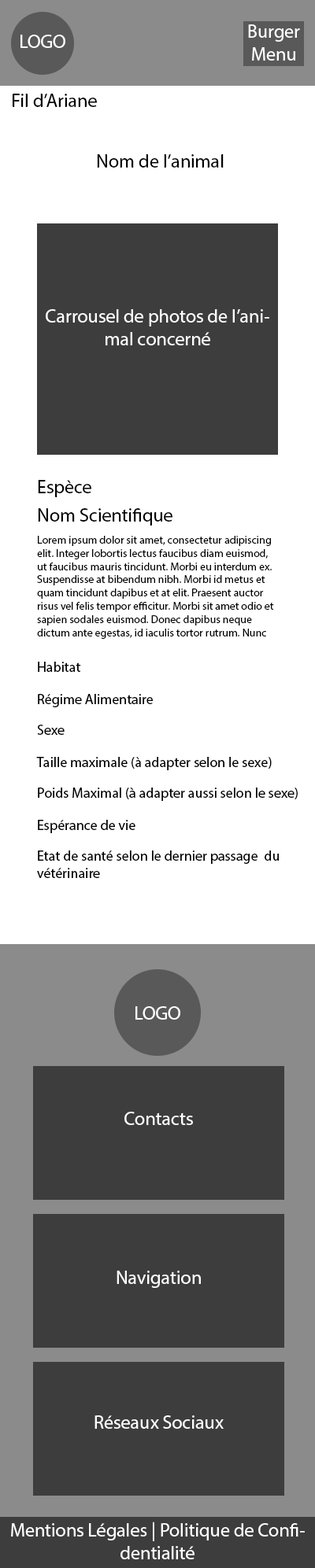
<style>
.page{position:relative;width:315px;height:1568px;background:#ffffff}
.page>*{position:absolute;margin:0}
.t1{font:18.9px "MyriadPro-Regular";color:#fffefe}
.t2{font:18.9px "MyriadPro-Regular";color:#000000}
.t3{font:18.9px "MyriadPro-Regular";color:#ffffff}
.t4{font:11px "MyriadPro-Regular";color:#000000}
.t5{font:14.2px "MyriadPro-Regular";color:#000000}
</style>
<div class="page">
<p class="t1" style="left:248px;top:24px;width:52px;height:37px;text-align:center">Burger Menu</p>
<p class="t1" style="left:20px;top:35px;width:45px;height:13px">LOGO</p>
<p class="t2" style="left:13px;top:94px;width:84px;height:13px">Fil d’Ariane</p>
<p class="t2" style="left:97px;top:154px;width:126px;height:14px">Nom de l’animal</p>
<p class="t3" style="left:46px;top:309px;width:223px;height:36px;text-align:center">Carrousel de photos de l’animal concerné</p>
<p class="t2" style="left:38px;top:480px;width:53px;height:17px">Espèce</p>
<p class="t2" style="left:38px;top:508px;width:134px;height:18px">Nom Scientifique</p>
<p class="t4" style="left:37px;top:536px;width:237px;height:103px">Lorem ipsum dolor sit amet, consectetur adipiscing elit. Integer lobortis lectus faucibus diam euismod, ut faucibus mauris tincidunt. Morbi eu interdum ex. Suspendisse at bibendum nibh. Morbi id metus et quam tincidunt dapibus et at elit. Praesent auctor risus vel felis tempor efficitur. Morbi sit amet odio et sapien sodales euismod. Donec dapibus neque dictum ante egestas, id iaculis tortor rutrum. Nunc cursus est eu scelerisque faucibus. Fusce sit amet mollis velit.</p>
<p class="t5" style="left:38px;top:662px;width:43px;height:10px">Habitat</p>
<p class="t5" style="left:38px;top:694px;width:115px;height:13px">Régime Alimentaire</p>
<p class="t5" style="left:37px;top:725px;width:28px;height:10px">Sexe</p>
<p class="t5" style="left:36px;top:757px;width:235px;height:13px">Taille maximale (à adapter selon le sexe)</p>
<p class="t5" style="left:38px;top:788px;width:259px;height:13px">Poids Maximal (à adapter aussi selon le sexe)</p>
<p class="t5" style="left:38px;top:820px;width:97px;height:13px">Espérance de vie</p>
<p class="t5" style="left:37px;top:850px;width:242px;height:28px">Etat de santé selon le dernier passage  du vétérinaire</p>
<p class="t3" style="left:135px;top:1006px;width:45px;height:14px">LOGO</p>
<p class="t3" style="left:124px;top:1112px;width:69px;height:13px">Contacts</p>
<p class="t3" style="left:116px;top:1271px;width:85px;height:17px">Navigation</p>
<p class="t3" style="left:94px;top:1415px;width:129px;height:14px">Réseaux Sociaux</p>
<p class="t3" style="left:11px;top:1522px;width:293px;height:37px;text-align:center">Mentions Légales | Politique de Confidentialité</p>
</div>
